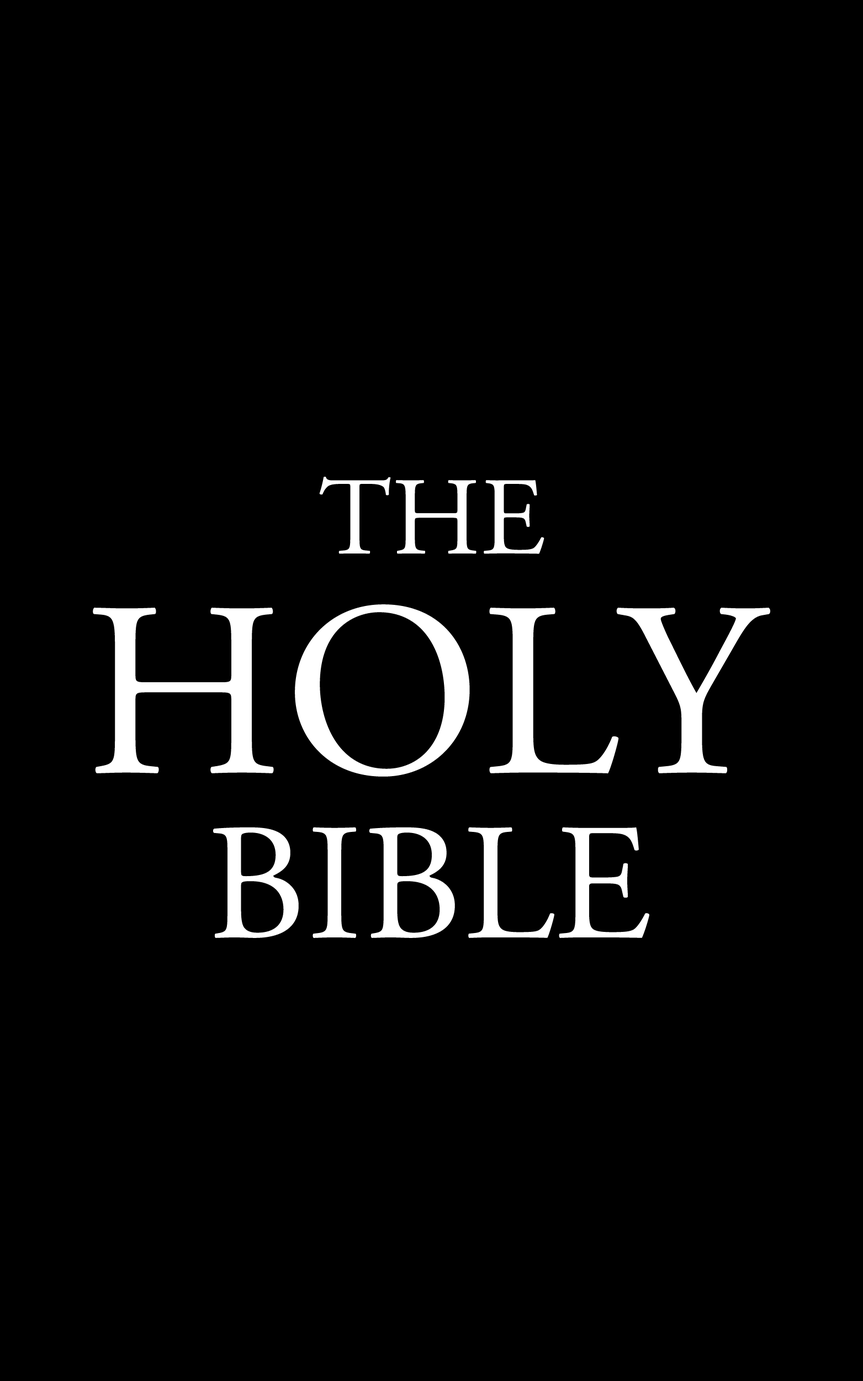
<style>
.page{position:relative;width:863px;height:1381px;background:#000000}
.page>*{position:absolute;margin:0}
.t1{font:110.5px "AGaramondPro-Regular";color:#ffffff;text-transform:uppercase}
.t2{font:248.6px "AGaramondPro-Regular";color:#ffffff;text-transform:uppercase}
.t3{font:165.7px "AGaramondPro-Regular";color:#ffffff;text-transform:uppercase}
</style>
<div class="page">
<p class="t1" style="left:319px;top:477px;width:226px;height:77px">The</p>
<p class="t2" style="left:93px;top:604px;width:678px;height:173px">Holy</p>
<p class="t3" style="left:213px;top:827px;width:437px;height:111px">Bible</p>
</div>
